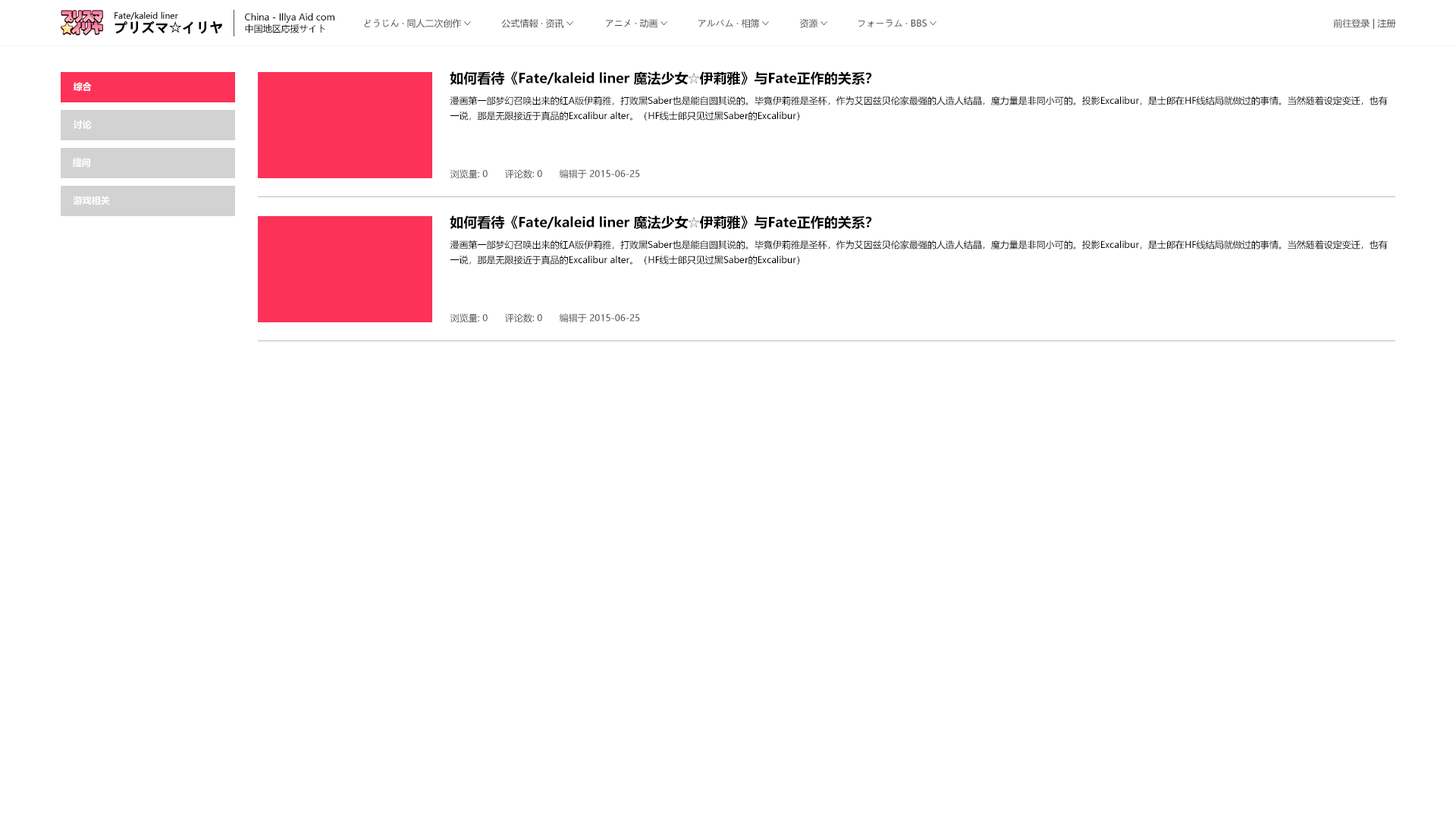
<style>
.page{position:relative;width:1456px;height:819px;background:#ffffff}
.page>*{position:absolute;margin:0}
.t1{font:8.3px "MicrosoftYaHeiUI";color:#000000}
.t2{font:9.1px "MicrosoftYaHeiUI";color:#000000}
.t3{font:13.6px "MicrosoftYaHeiUI-Bold";color:#000000}
.t4{font:13.6px "AdobeHeitiStd-Regular";color:#000000}
.t5{font:9.1px "MicrosoftYaHeiUI";color:#484848}
.t6{font:9.1px "MS-PGothic"}
.t7{font:9.1px "MicrosoftYaHeiUI-Bold";color:#ffffff}
.t8{font:9.1px/15.2px "MicrosoftYaHeiUI";color:#000000}
.t9{font:9.1px "MicrosoftYaHeiUI";color:#505050}
</style>
<div class="page">
<p class="t1" style="left:115px;top:11px;width:63px;height:9px">Fate/kaleid liner</p>
<p class="t2" style="left:245px;top:13px;width:89px;height:10px">China - Illya Aid com</p>
<p class="t3" style="left:115px;top:20px;width:107px;height:14px">プリズマ<span class="t4">☆</span>イリヤ</p>
<p class="t2" style="left:245px;top:24px;width:80px;height:9px">中国地区応援サイト</p>
<p class="t5" style="left:364px;top:19px;width:98px;height:9px">どうじん · 同人二次创作</p>
<p class="t6" style="left:464px;top:21px;width:7px;height:5px;rotate:90deg">&gt;</p>
<p class="t5" style="left:501px;top:18px;width:63px;height:10px">公式情報 · 资讯</p>
<p class="t6" style="left:566px;top:21px;width:7px;height:5px;rotate:90deg">&gt;</p>
<p class="t5" style="left:605px;top:19px;width:53px;height:9px">アニメ · 动画</p>
<p class="t6" style="left:660px;top:21px;width:7px;height:5px;rotate:90deg">&gt;</p>
<p class="t5" style="left:698px;top:19px;width:62px;height:9px">アルバム · 相簿</p>
<p class="t6" style="left:762px;top:21px;width:7px;height:5px;rotate:90deg">&gt;</p>
<p class="t5" style="left:799px;top:18px;width:19px;height:10px">资源</p>
<p class="t6" style="left:821px;top:21px;width:6px;height:5px;rotate:90deg">&gt;</p>
<p class="t5" style="left:858px;top:19px;width:69px;height:8px">フォーラム · BBS</p>
<p class="t6" style="left:930px;top:21px;width:7px;height:5px;rotate:90deg">&gt;</p>
<p class="t5" style="left:1333px;top:19px;width:63px;height:10px">前往登录 | 注册</p>
<p class="t3" style="left:450px;top:71px;width:422px;height:15px">如何看待《Fate/kaleid liner 魔法少女☆伊莉雅》与Fate正作的关系？</p>
<p class="t7" style="left:74px;top:82px;width:18px;height:9px">综合</p>
<p class="t8" style="left:450px;top:96px;width:938px;height:25px">漫画第一部梦幻召唤出来的红A版伊莉雅，打败黑Saber也是能自圆其说的。毕竟伊莉雅是圣杯，作为艾因兹贝伦家最强的人造人结晶，魔力量是非同小可的。投影Excalibur，是士郎在HF线结局就做过的事情。当然随着设定变迁，也有一说，那是无限接近于真品的Excalibur alter。（HF线士郎只见过黑Saber的Excalibur）<br><br>作者：钱坤一<br>链接：https://www.zhihu.com/question/31529330/answer/52576053<br>来源：知乎<br>著作权归作者所有。商业转载请联系作者获得授权，非商业转载请注明出处。</p>
<p class="t7" style="left:74px;top:120px;width:18px;height:9px">讨论</p>
<p class="t7" style="left:73px;top:158px;width:17px;height:10px">提问</p>
<p class="t9" style="left:450px;top:169px;width:190px;height:10px">浏览量: 0 评论数: 0 编辑于 2015-06-25</p>
<p class="t7" style="left:73px;top:196px;width:37px;height:10px">游戏相关</p>
<p class="t3" style="left:450px;top:215px;width:422px;height:15px">如何看待《Fate/kaleid liner 魔法少女☆伊莉雅》与Fate正作的关系？</p>
<p class="t8" style="left:450px;top:240px;width:938px;height:25px">漫画第一部梦幻召唤出来的红A版伊莉雅，打败黑Saber也是能自圆其说的。毕竟伊莉雅是圣杯，作为艾因兹贝伦家最强的人造人结晶，魔力量是非同小可的。投影Excalibur，是士郎在HF线结局就做过的事情。当然随着设定变迁，也有一说，那是无限接近于真品的Excalibur alter。（HF线士郎只见过黑Saber的Excalibur）<br><br>作者：钱坤一<br>链接：https://www.zhihu.com/question/31529330/answer/52576053<br>来源：知乎<br>著作权归作者所有。商业转载请联系作者获得授权，非商业转载请注明出处。</p>
<p class="t9" style="left:450px;top:313px;width:190px;height:10px">浏览量: 0 评论数: 0 编辑于 2015-06-25</p>
</div>
